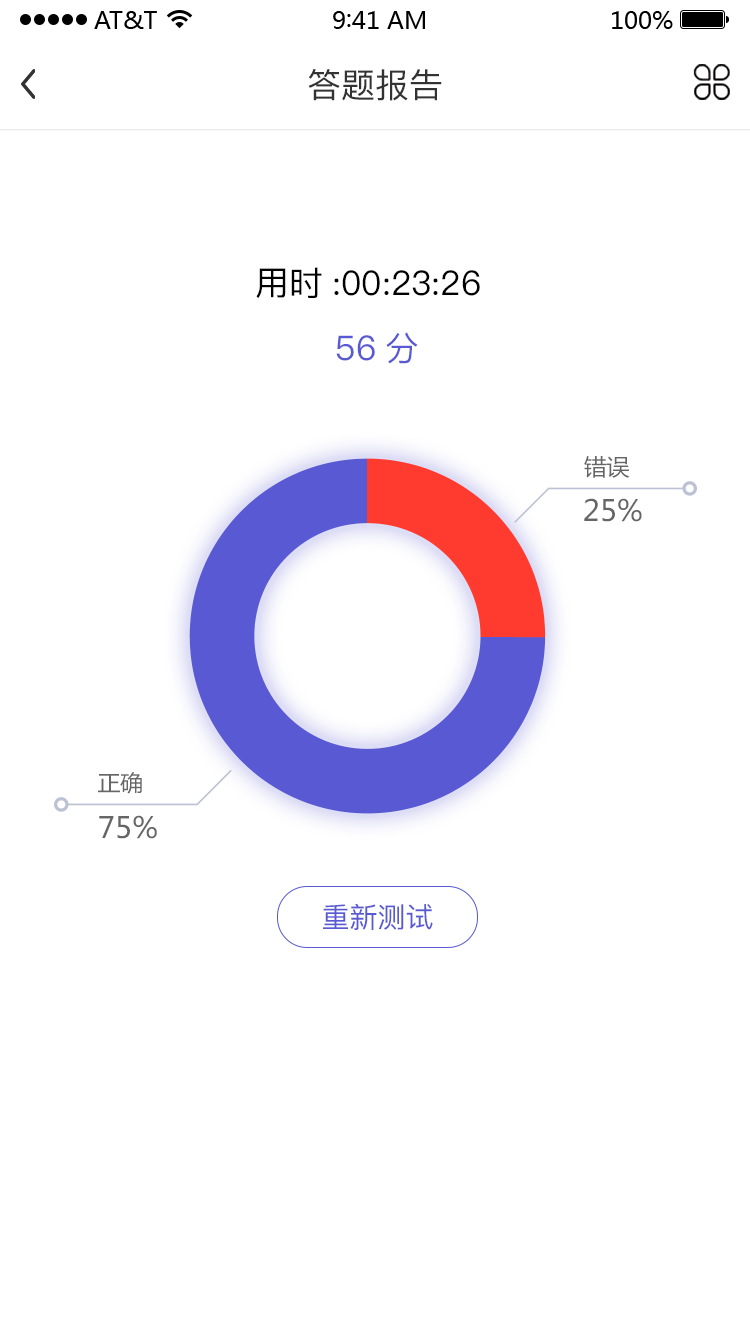
<style>
.page{position:relative;width:750px;height:1334px;background:#ffffff}
.page>*{position:absolute;margin:0}
.t1{font:34px "PingFang-SC-Medium";color:#333333}
.t2{font:34px "PingFang-SC-Medium";color:#000000}
.t3{font:34px "PingFang-SC-Medium";color:#595ad3}
.t4{font:22.6px "MicrosoftYaHei";color:#666666}
.t5{font:29px "MicrosoftYaHei";color:#666666}
.t6{font:28px "PingFang-SC-Medium";color:#595ad3}
</style>
<div class="page">
<p class="t1" style="left:308px;top:69px;width:134px;height:32px">答题报告</p>
<p class="t2" style="left:256px;top:267px;width:224px;height:31px">用时:00:23:26</p>
<p class="t3" style="left:336px;top:332px;width:82px;height:32px">56分</p>
<p class="t4" style="left:584px;top:456px;width:46px;height:22px">错误</p>
<p class="t5" style="left:584px;top:498px;width:58px;height:24px">25%</p>
<p class="t4" style="left:98px;top:772px;width:44px;height:22px">正确</p>
<p class="t5" style="left:99px;top:815px;width:58px;height:24px">75%</p>
<p class="t6" style="left:323px;top:903px;width:110px;height:27px">重新测试</p>
</div>
